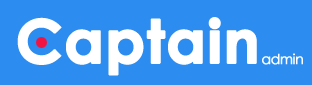
<style>
.page{position:relative;width:312px;height:85px;background:#2d8cf0}
.page>*{position:absolute;margin:0}
.t1{font:60px "CenturyGothic-Bold";color:#ffffff;font-weight:bold}
.t2{font:14px "CenturyGothic";letter-spacing:-0.05em;color:#ffffff;font-weight:bold}
</style>
<div class="page">
<p class="t1" style="left:17px;top:17px;width:240px;height:59px">Captain</p>
<p class="t2" style="left:262px;top:53px;width:41px;height:12px">admin</p>
</div>
